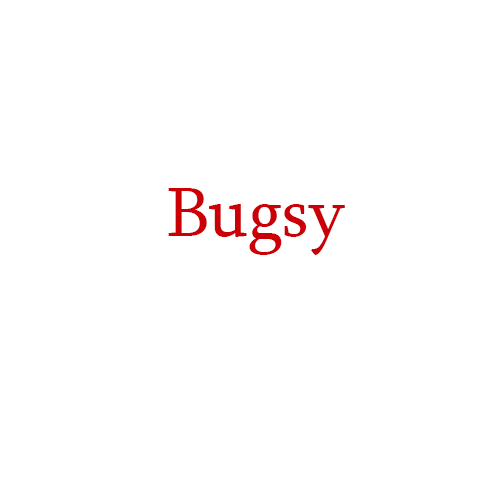
<style>
.page{position:relative;width:500px;height:500px;background:#ffffff}
.page>*{position:absolute;margin:0}
.t1{font:72px "Sylfaen";color:#cb0006}
</style>
<div class="page">
<p class="t1" style="left:168px;top:188px;width:177px;height:67px">Bugsy</p>
</div>
